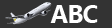
<style>
.page{position:relative;width:112px;height:28px;background:#333333}
.page>*{position:absolute;margin:0}
.t1{font:25px "Ebrima-Bold";letter-spacing:-0.025em;color:#ffffff}
</style>
<div class="page">
<p class="t1" style="left:50px;top:5px;width:48px;height:18px">ABC</p>
</div>
